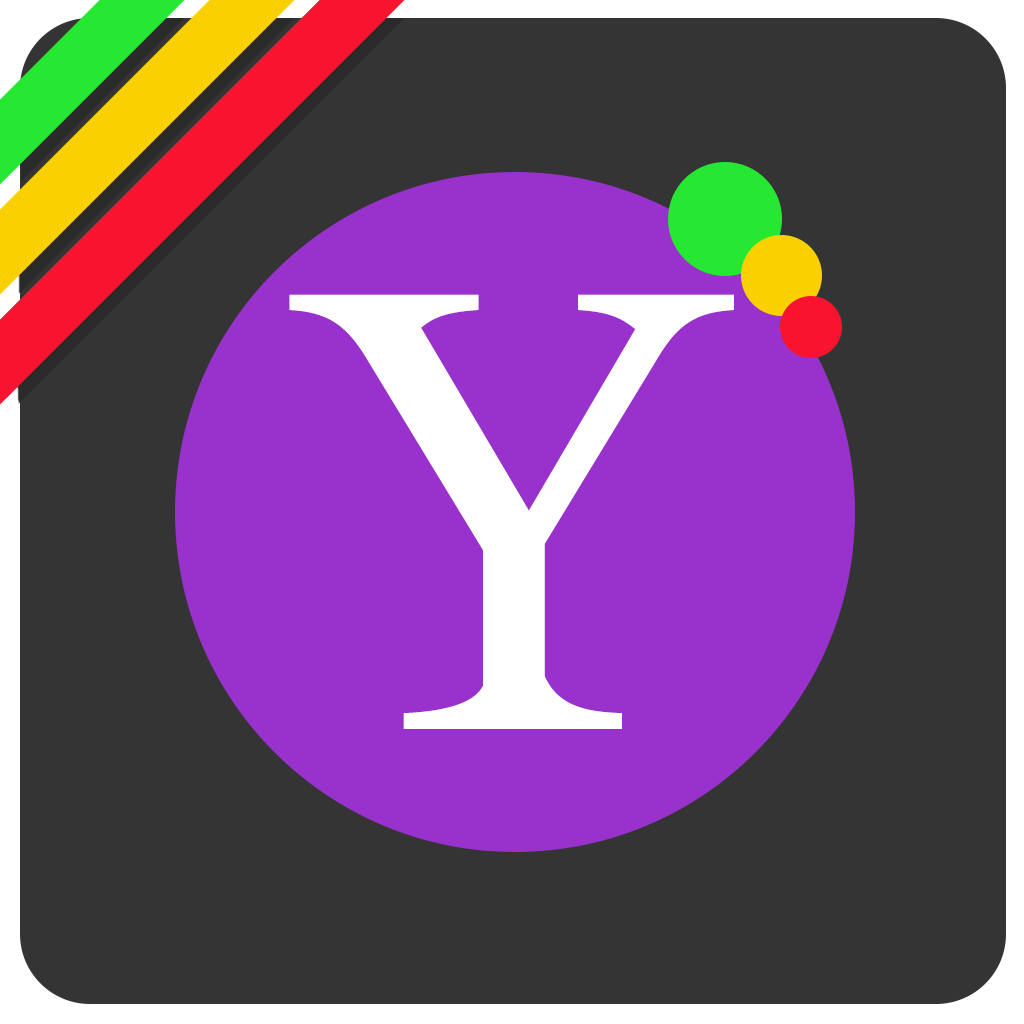
<style>
.page{position:relative;width:1024px;height:1024px;background:#343434}
.page>*{position:absolute;margin:0}
.t1{font:683.7px "YaleNew-Roman";color:#ffffff}
</style>
<div class="page">
<p class="t1" style="left:289px;top:294px;width:445px;height:435px">Y</p>
</div>
